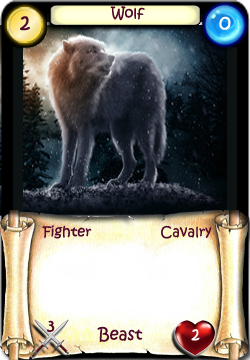
<style>
.page{position:relative;width:250px;height:360px}
.page>*{position:absolute;margin:0}
.t1{font:14px "KristenITC-Regular";color:#51092d}
.t2{font:20px "KristenITC-Regular";color:#51092d}
.t3{font:20px "KristenITC-Regular";color:#ffffff}
.t4{font:16px "KristenITC-Regular";color:#51092d}
.t5{font:16px "KristenITC-Regular";color:#fefefe}
</style>
<div class="page">
<p class="t1" style="left:110px;top:6px;width:35px;height:15px">Wolf</p>
<p class="t2" style="left:20px;top:16px;width:10px;height:15px">2</p>
<p class="t3" style="left:219px;top:16px;width:12px;height:14px">0</p>
<p class="t1" style="left:42px;top:225px;width:50px;height:14px">Fighter</p>
<p class="t1" style="left:161px;top:225px;width:51px;height:14px">Cavalry</p>
<p class="t4" style="left:47px;top:320px;width:8px;height:12px">3</p>
<p class="t4" style="left:97px;top:326px;width:46px;height:16px">Beast</p>
<p class="t5" style="left:191px;top:329px;width:9px;height:12px">2</p>
</div>
